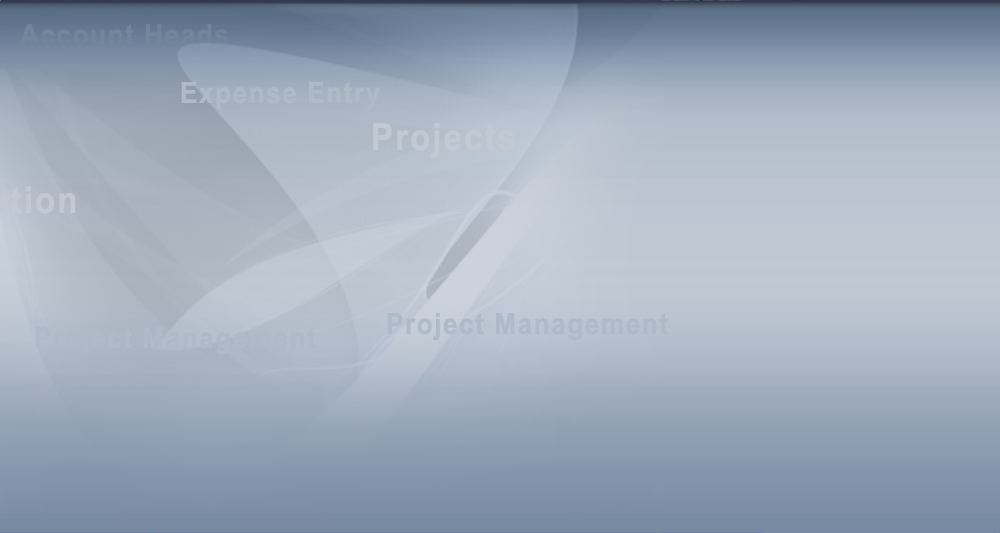
<style>
.page{position:relative;width:1000px;height:533px}
.page>*{position:absolute;margin:0}
.t1{font:29.3px "Arial-BoldMT";letter-spacing:0.06em;color:#7c8ea5;scale:0.89 1}
.t2{font:29.3px "Arial-BoldMT";letter-spacing:0.06em;color:#afbac9;scale:0.89 1}
.t3{font:37.3px "Arial-BoldMT";letter-spacing:0.06em;color:#c2c9d3;scale:0.89 1}
</style>
<div class="page">
<p class="t1" style="left:20px;top:24px;width:208px;height:22px">Account Heads</p>
<p class="t2" style="left:181px;top:82px;width:199px;height:28px">Expense Entry</p>
<p class="t3" style="left:373px;top:123px;width:142px;height:35px">Projects</p>
<p class="t3" style="left:0px;top:186px;width:76px;height:28px">Institution</p>
<p class="t2" style="left:387px;top:313px;width:281px;height:28px">Project Management</p>
</div>
